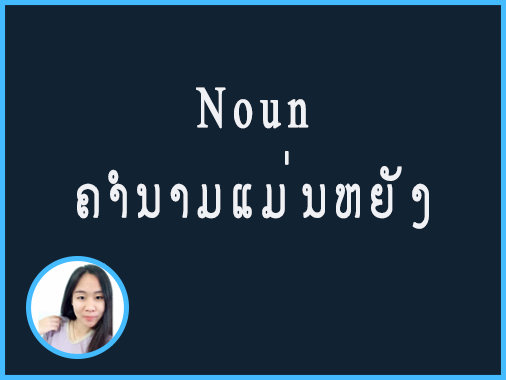
<style>
.page{position:relative;width:507px;height:380px;background:#112233}
.page>*{position:absolute;margin:0}
.t1{font:58.3px "TimesNewRomanPSMT";letter-spacing:0.18em;color:#f0f1f5;font-weight:bold;scale:0.67 1}
.t2{font:58.3px "SaysetthaOT";letter-spacing:0.18em;color:#f0f1f5;font-weight:bold;scale:0.67 1}
</style>
<div class="page">
<p class="t1" style="left:196px;top:87px;width:113px;height:42px">Noun</p>
<p class="t2" style="left:77px;top:151px;width:352px;height:78px">ຄຳນາມ​ແມ່ນ​ຫຍັງ</p>
</div>
